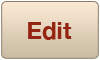
<style>
.page{position:relative;width:100px;height:60px}
.page>*{position:absolute;margin:0}
.t1{font:24px "HelveticaNeue-Bold";color:#942513}
</style>
<div class="page">
<p class="t1" style="left:28px;top:22px;width:44px;height:18px">Edit</p>
</div>
